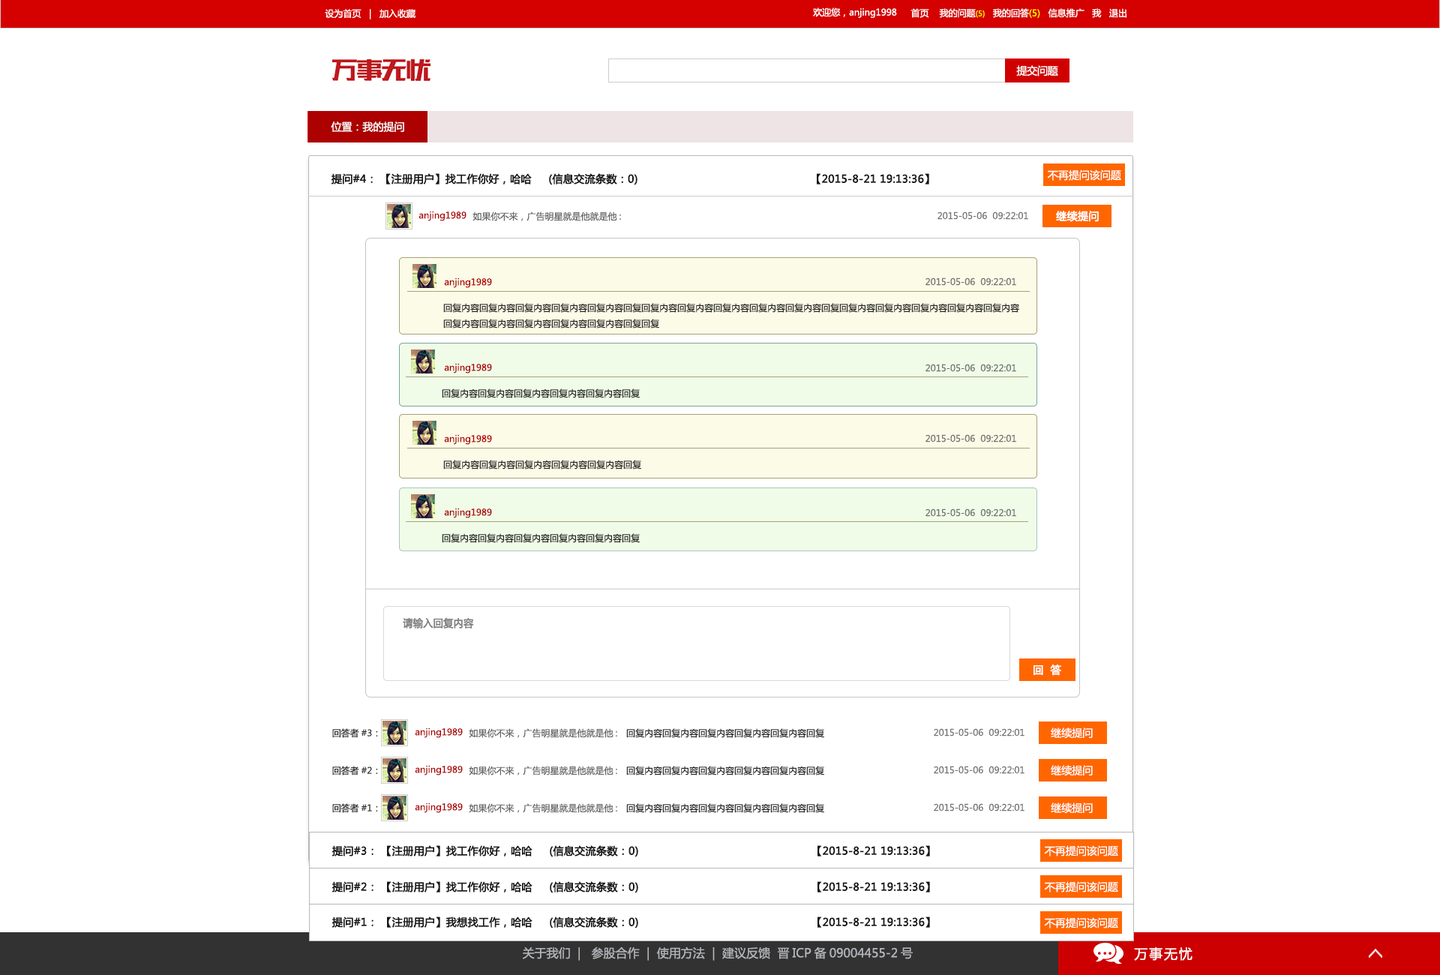
<style>
.page{position:relative;width:1440px;height:975px;background:#ffffff}
.page>*{position:absolute;margin:0}
.t1{font:9px "MicrosoftYaHei";color:#ffffff}
.t2{font:7.5px "MicrosoftYaHei";color:#fffc00}
.t3{font:9px "MicrosoftYaHei";color:#fff600}
.t4{font:10.5px "MicrosoftYaHei";letter-spacing:-0.02em;color:#ffffff}
.t5{font:10.5px "MicrosoftYaHei";color:#ffffff}
.t6{font:10.5px "MicrosoftYaHei";color:#161616;font-weight:bold}
.t7{font:9px "MicrosoftYaHei";color:#ad0000}
.t8{font:9px "MicrosoftYaHei";color:#636363}
.t9{font:9px "MicrosoftYaHei";color:#727272}
.t10{font:10.5px "MicrosoftYaHei";color:#ffffff;font-weight:bold}
.t11{font:9px "MicrosoftYaHei";color:#272727}
.t12{font:10.5px "MicrosoftYaHei";color:#808080;font-weight:bold;scale:0.94 1}
.t13{font:12px "MicrosoftYaHei";color:#b3b5ba}
.t14{font:13.5px "MicrosoftYaHei";letter-spacing:0.1em;color:#ffffff}
</style>
<div class="page">
<p class="t1" style="left:325px;top:9px;width:91px;height:11px">设为首页   |   加入收藏</p>
<p class="t1" style="left:813px;top:8px;width:84px;height:10px">欢迎您，anjing1998</p>
<p class="t1" style="left:910px;top:8px;width:216px;height:10px">首页    我的问题<span class="t2">(5)</span>   我的回答<span class="t3">(5)</span>   信息推广   我   退出</p>
<p class="t4" style="left:1016px;top:65px;width:42px;height:11px">提交问题</p>
<p class="t5" style="left:331px;top:122px;width:73px;height:10px">位置：我的提问</p>
<p class="t6" style="left:331px;top:173px;width:598px;height:12px">提问#4： 【注册用户】找工作你好，哈哈     (信息交流条数：0)                                                   【2015-8-21 19:13:36】</p>
<p class="t5" style="left:1047px;top:170px;width:74px;height:11px">不再提问该问题</p>
<p class="t7" style="left:418px;top:211px;width:48px;height:10px">anjing1989</p>
<p class="t8" style="left:472px;top:212px;width:149px;height:9px">如果你不来，广告明星就是他就是他:</p>
<p class="t9" style="left:938px;top:212px;width:90px;height:8px">2015-05-06  09:22:01</p>
<p class="t10" style="left:1056px;top:211px;width:43px;height:11px">继续提问</p>
<p class="t7" style="left:444px;top:278px;width:48px;height:10px">anjing1989</p>
<p class="t9" style="left:926px;top:278px;width:90px;height:8px">2015-05-06  09:22:01</p>
<p class="t11" style="left:443px;top:303px;width:576px;height:25px">回复内容回复内容回复内容回复内容回复内容回复回复内容回复内容回复内容回复内容回复内容回复回复内容回复内容回复内容回复内容回复内容<br>回复内容回复内容回复内容回复内容回复内容回复回复</p>
<p class="t7" style="left:444px;top:363px;width:48px;height:11px">anjing1989</p>
<p class="t9" style="left:926px;top:364px;width:90px;height:8px">2015-05-06  09:22:01</p>
<p class="t11" style="left:442px;top:388px;width:198px;height:10px">回复内容回复内容回复内容回复内容回复内容回复</p>
<p class="t7" style="left:444px;top:434px;width:48px;height:11px">anjing1989</p>
<p class="t9" style="left:926px;top:434px;width:90px;height:8px">2015-05-06  09:22:01</p>
<p class="t11" style="left:443px;top:460px;width:198px;height:10px">回复内容回复内容回复内容回复内容回复内容回复</p>
<p class="t7" style="left:444px;top:508px;width:48px;height:10px">anjing1989</p>
<p class="t9" style="left:926px;top:508px;width:90px;height:9px">2015-05-06  09:22:01</p>
<p class="t11" style="left:442px;top:533px;width:198px;height:10px">回复内容回复内容回复内容回复内容回复内容回复</p>
<p class="t12" style="left:403px;top:617px;width:71px;height:11px">请输入回复内容</p>
<p class="t10" style="left:1034px;top:664px;width:27px;height:12px">回  答</p>
<p class="t11" style="left:332px;top:728px;width:46px;height:10px">回答者#3：</p>
<p class="t7" style="left:415px;top:728px;width:48px;height:10px">anjing1989</p>
<p class="t8" style="left:469px;top:728px;width:148px;height:10px">如果你不来，广告明星就是他就是他:</p>
<p class="t11" style="left:626px;top:728px;width:198px;height:10px">回复内容回复内容回复内容回复内容回复内容回复</p>
<p class="t9" style="left:934px;top:728px;width:90px;height:8px">2015-05-06  09:22:01</p>
<p class="t5" style="left:1051px;top:728px;width:42px;height:11px">继续提问</p>
<p class="t11" style="left:332px;top:766px;width:46px;height:10px">回答者#2：</p>
<p class="t7" style="left:415px;top:765px;width:48px;height:11px">anjing1989</p>
<p class="t8" style="left:469px;top:766px;width:148px;height:10px">如果你不来，广告明星就是他就是他:</p>
<p class="t11" style="left:626px;top:766px;width:198px;height:10px">回复内容回复内容回复内容回复内容回复内容回复</p>
<p class="t9" style="left:934px;top:766px;width:90px;height:8px">2015-05-06  09:22:01</p>
<p class="t5" style="left:1051px;top:765px;width:42px;height:11px">继续提问</p>
<p class="t11" style="left:332px;top:803px;width:46px;height:10px">回答者#1：</p>
<p class="t7" style="left:415px;top:802px;width:48px;height:11px">anjing1989</p>
<p class="t8" style="left:469px;top:803px;width:148px;height:10px">如果你不来，广告明星就是他就是他:</p>
<p class="t11" style="left:626px;top:803px;width:198px;height:10px">回复内容回复内容回复内容回复内容回复内容回复</p>
<p class="t9" style="left:934px;top:803px;width:90px;height:9px">2015-05-06  09:22:01</p>
<p class="t5" style="left:1051px;top:802px;width:42px;height:12px">继续提问</p>
<p class="t6" style="left:332px;top:845px;width:598px;height:12px">提问#3： 【注册用户】找工作你好，哈哈     (信息交流条数：0)                                                   【2015-8-21 19:13:36】</p>
<p class="t5" style="left:1044px;top:845px;width:74px;height:11px">不再提问该问题</p>
<p class="t6" style="left:332px;top:881px;width:598px;height:12px">提问#2： 【注册用户】找工作你好，哈哈     (信息交流条数：0)                                                   【2015-8-21 19:13:36】</p>
<p class="t5" style="left:1044px;top:881px;width:74px;height:11px">不再提问该问题</p>
<p class="t6" style="left:332px;top:916px;width:598px;height:12px">提问#1： 【注册用户】我想找工作，哈哈     (信息交流条数：0)                                                   【2015-8-21 19:13:36】</p>
<p class="t5" style="left:1044px;top:917px;width:74px;height:11px">不再提问该问题</p>
<p class="t13" style="left:522px;top:946px;width:391px;height:15px">关于我们  |   参股合作  |  使用方法  |  建议反馈  晋ICP备09004455-2号</p>
<p class="t14" style="left:1134px;top:947px;width:58px;height:14px">万事无忧</p>
</div>
